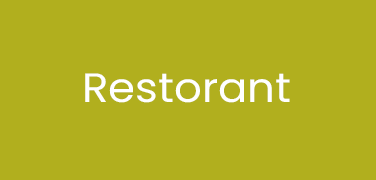
<style>
.page{position:relative;width:376px;height:180px;background:#b1af1e}
.page>*{position:absolute;margin:0}
.t1{font:41px "Poppins-Regular";color:#ffffff;scale:1.06 1}
</style>
<div class="page">
<p class="t1" style="left:85px;top:73px;width:205px;height:30px">Restorant</p>
</div>
